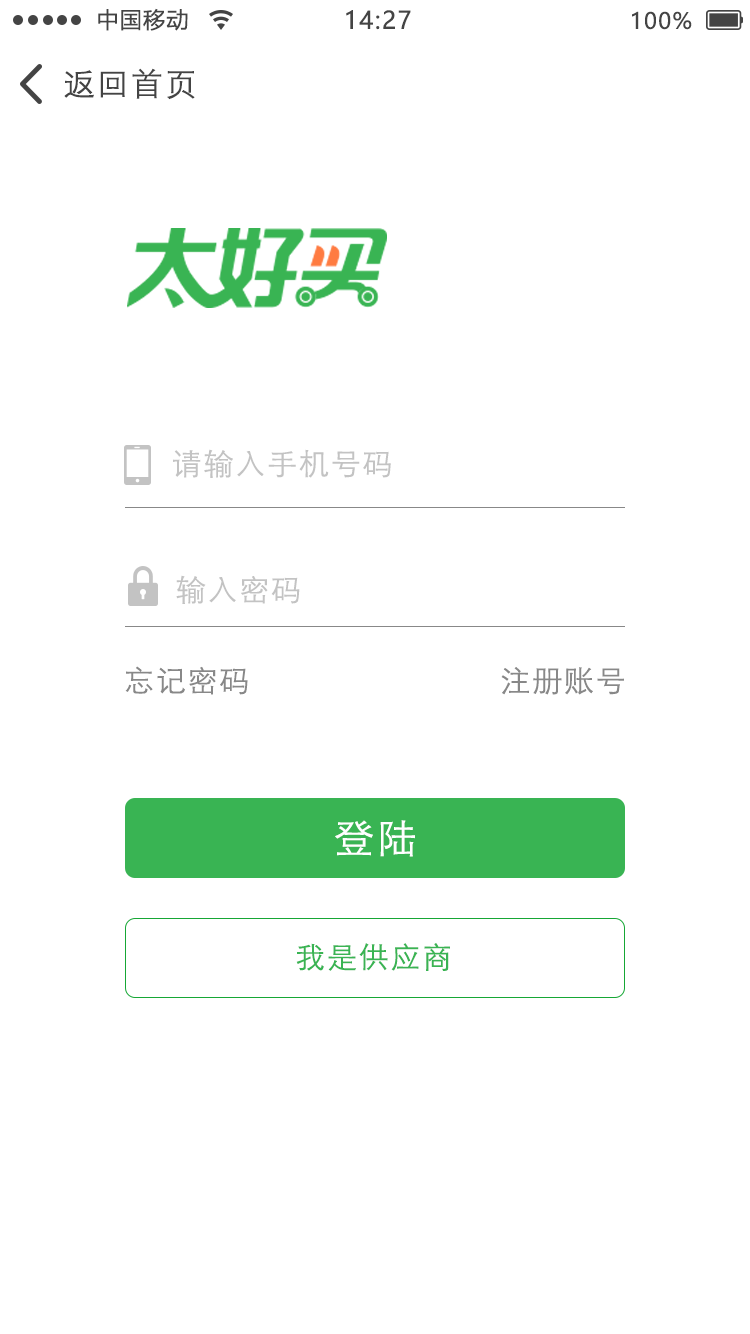
<style>
.page{position:relative;width:750px;height:1334px;background:#ffffff}
.page>*{position:absolute;margin:0}
.t1{font:22px "MicrosoftYaHei";letter-spacing:0.06em;color:#444444}
.t2{font:24px "MicrosoftYaHei";letter-spacing:0.06em;color:#444444}
.t3{font:32px "STXihei";letter-spacing:0.06em;color:#444444}
.t4{font:30px "STXihei";letter-spacing:0.06em;color:#c3c3c3}
.t5{font:30px "STXihei";letter-spacing:0.06em;color:#888888}
.t6{font:40px "STXihei";letter-spacing:0.06em;color:#ffffff}
.t7{font:30px "STXihei";letter-spacing:0.06em;color:#39b453}
</style>
<div class="page">
<p class="t1" style="left:98px;top:8px;width:90px;height:23px">中国移动</p>
<p class="t2" style="left:346px;top:10px;width:65px;height:20px">14:27</p>
<p class="t1" style="left:632px;top:11px;width:60px;height:19px">100%</p>
<p class="t3" style="left:64px;top:68px;width:131px;height:32px">返回首页</p>
<p class="t4" style="left:173px;top:449px;width:218px;height:29px">请输入手机号码</p>
<p class="t4" style="left:176px;top:575px;width:124px;height:29px">输入密码</p>
<p class="t5" style="left:125px;top:666px;width:123px;height:29px">忘记密码</p>
<p class="t5" style="left:501px;top:667px;width:123px;height:28px">注册账号</p>
<p class="t6" style="left:335px;top:820px;width:80px;height:37px">登陆</p>
<p class="t7" style="left:296px;top:943px;width:154px;height:28px">我是供应商</p>
</div>
